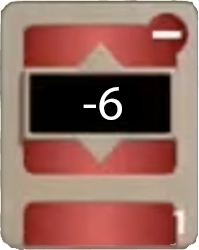
<style>
.page{position:relative;width:199px;height:250px}
.page>*{position:absolute;margin:0}
.t1{font:50px "MyriadPro-Regular";color:#ffffff}
</style>
<div class="page">
<p class="t1" style="left:83px;top:87px;width:39px;height:33px">-6</p>
</div>
